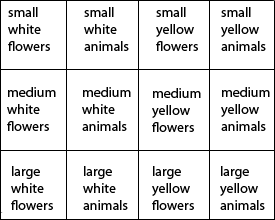
<style>
.page{position:relative;width:275px;height:220px;background:#ffffff}
.page>*{position:absolute;margin:0}
.t1{font:14px "MyriadPro-Regular";color:#000000}
</style>
<div class="page">
<p class="t1" style="left:8px;top:7px;width:42px;height:44px">small<br>white<br>flowers</p>
<p class="t1" style="left:84px;top:7px;width:45px;height:44px">small<br>white<br>animals</p>
<p class="t1" style="left:156px;top:7px;width:42px;height:44px">small<br>yellow<br>flowers</p>
<p class="t1" style="left:221px;top:7px;width:45px;height:44px">small<br>yellow<br>animals</p>
<p class="t1" style="left:7px;top:87px;width:49px;height:44px">medium<br>white<br>flowers</p>
<p class="t1" style="left:82px;top:87px;width:49px;height:44px">medium<br>white<br>animals</p>
<p class="t1" style="left:221px;top:87px;width:49px;height:44px">medium<br>yellow<br>animals</p>
<p class="t1" style="left:11px;top:166px;width:42px;height:44px">large<br>white<br>flowers</p>
<p class="t1" style="left:83px;top:166px;width:45px;height:44px">large<br>white<br>animals</p>
<p class="t1" style="left:152px;top:166px;width:42px;height:44px">large<br>yellow<br>flowers</p>
</div>
